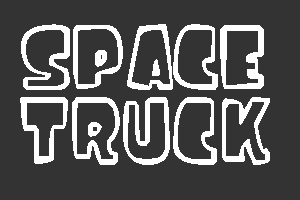
<style>
.page{position:relative;width:300px;height:200px;background:#333333}
.page>*{position:absolute;margin:0}
.t1{font:136px "iceagefont";color:#ffffff;scale:0.79 1}
.t2{font:141.9px "iceagefont";color:#ffffff;scale:0.74 1}
</style>
<div class="page">
<p class="t1" style="left:21px;top:24px;width:243px;height:66px">SPACE</p>
<p class="t2" style="left:20px;top:97px;width:250px;height:68px">TRUck</p>
</div>
